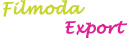
<style>
.page{position:relative;width:130px;height:38px;background:#ffffff}
.page>*{position:absolute;margin:0}
.t1{font:16px "LucidaHandwriting-Italic";color:#c5d52b;font-weight:bold}
.t2{font:16px "LucidaHandwriting-Italic";color:#df2195;font-weight:bold}
</style>
<div class="page">
<p class="t1" style="left:3px;top:0px;width:125px;height:39px;text-align:center">Filmoda <br><span class="t2">                 Export</span></p>
</div>
